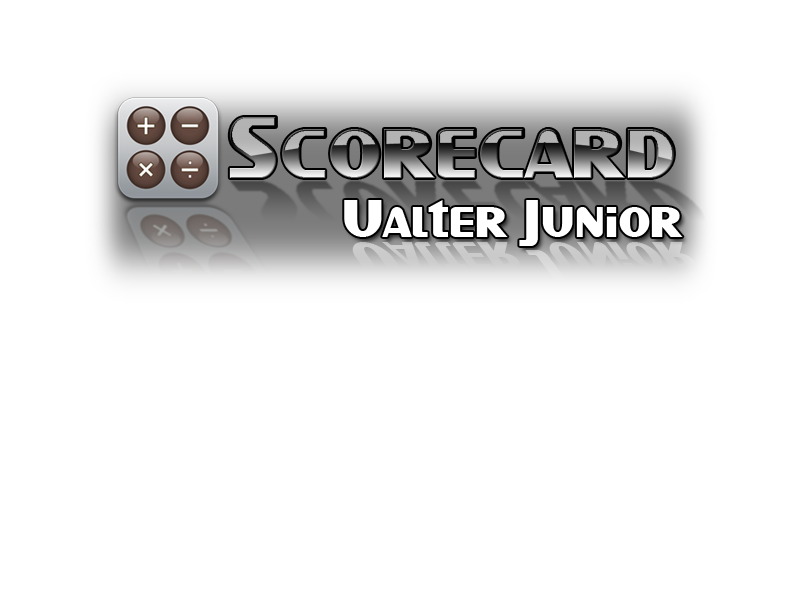
<style>
.page{position:relative;width:800px;height:600px;background:#ffffff}
.page>*{position:absolute;margin:0}
.t1{font:92.1px "SFIntellivised";letter-spacing:0.01em;color:#000000}
.t2{font:55.6px "SFIntellivised";letter-spacing:0.01em;color:#ffffff}
</style>
<div class="page">
<p class="t1" style="left:229px;top:117px;width:445px;height:61px">Scorecard</p>
<p class="t2" style="left:344px;top:200px;width:339px;height:46px">Ualter Junior</p>
</div>
